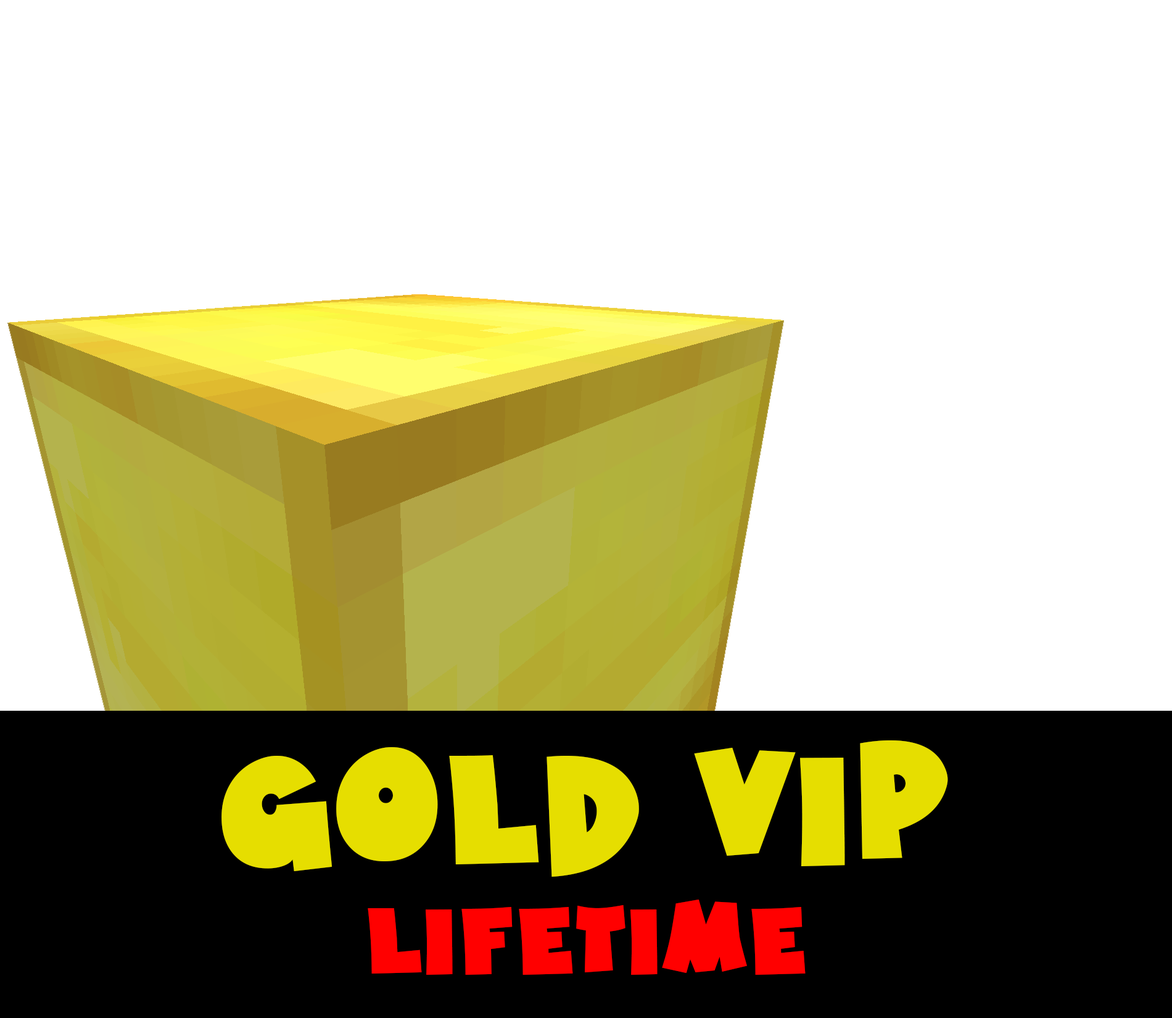
<style>
.page{position:relative;width:1172px;height:1018px;background:#ffffff}
.page>*{position:absolute;margin:0}
.t1{font:154.2px "HotMustardBTN";color:#e6de00}
.t2{font:92.5px "HotMustardBTN";color:#ff0000}
</style>
<div class="page">
<p class="t1" style="left:221px;top:740px;width:727px;height:136px">Gold VIP</p>
<p class="t2" style="left:368px;top:899px;width:437px;height:75px">Lifetime</p>
</div>
